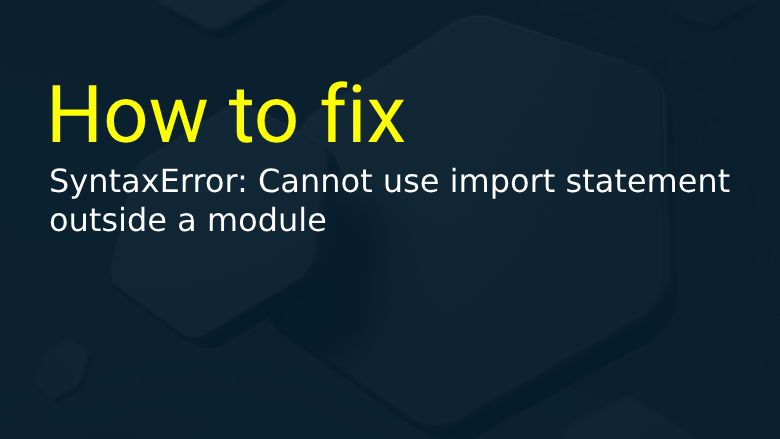
<style>
.page{position:relative;width:780px;height:439px}
.page>*{position:absolute;margin:0}
.t1{font:80px "Heebo-Regular";color:#ffff00}
.t2{font:32px "DejaVuSans";color:#ffffff}
</style>
<div class="page">
<p class="t1" style="left:52px;top:81px;width:353px;height:62px">How to fix</p>
<p class="t2" style="left:50px;top:167px;width:680px;height:65px">SyntaxError: Cannot use import statement outside a module</p>
</div>
